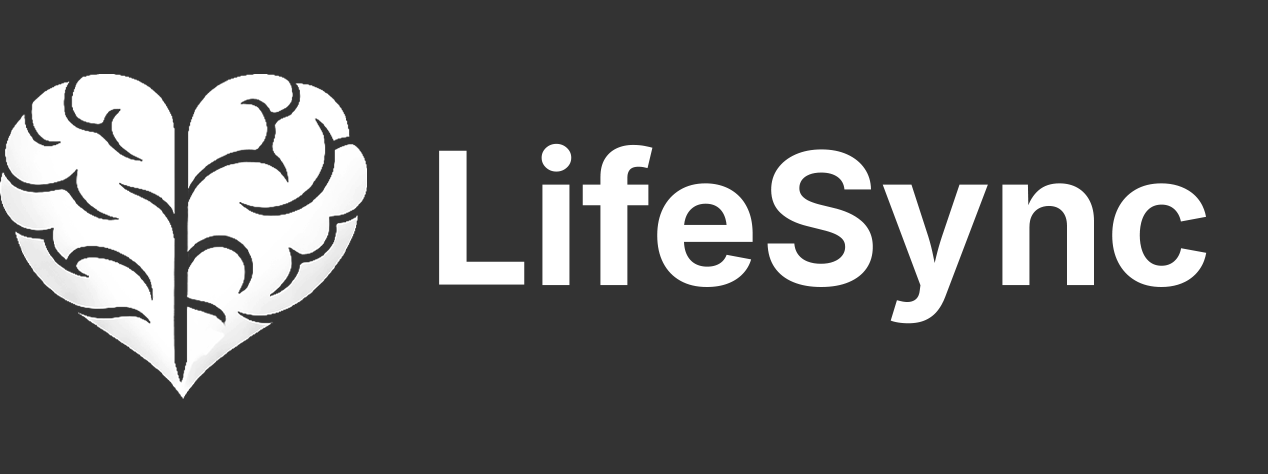
<style>
.page{position:relative;width:1268px;height:474px;background:#333333}
.page>*{position:absolute;margin:0}
.t1{font:183.8px "Inter-Bold";color:#ffffff}
</style>
<div class="page">
<p class="t1" style="left:439px;top:143px;width:768px;height:181px">LifeSync</p>
</div>
